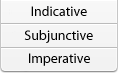
<style>
.page{position:relative;width:118px;height:73px}
.page>*{position:absolute;margin:0}
.t1{font:13.9px "MyriadPro-Regular";color:#000000}
</style>
<div class="page">
<p class="t1" style="left:31px;top:6px;width:56px;height:10px">Indicative</p>
<p class="t1" style="left:24px;top:30px;width:69px;height:13px">Subjunctive</p>
<p class="t1" style="left:29px;top:53px;width:61px;height:13px">Imperative</p>
</div>
